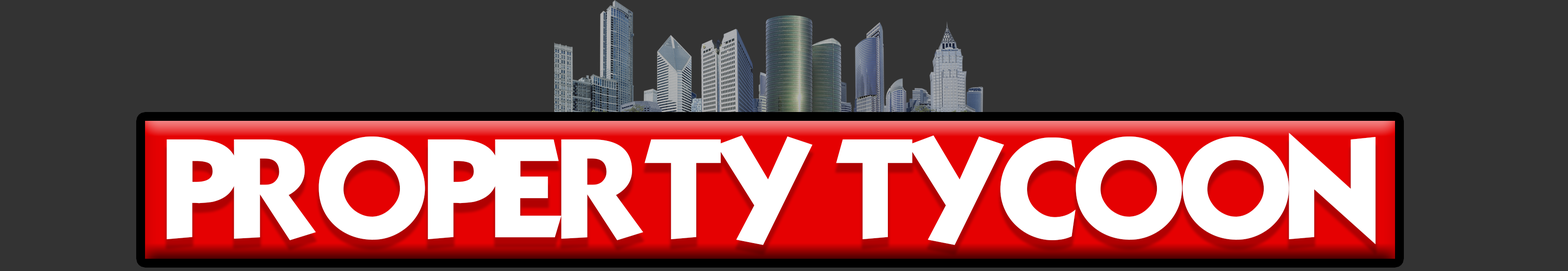
<style>
.page{position:relative;width:1568px;height:271px;background:#333333}
.page>*{position:absolute;margin:0}
.t1{font:121.8px "KabelBook";letter-spacing:-0.1em;color:#ffffff}
</style>
<div class="page">
<p class="t1" style="left:167px;top:133px;width:1209px;height:112px">PROPERTY TYCOON</p>
</div>
